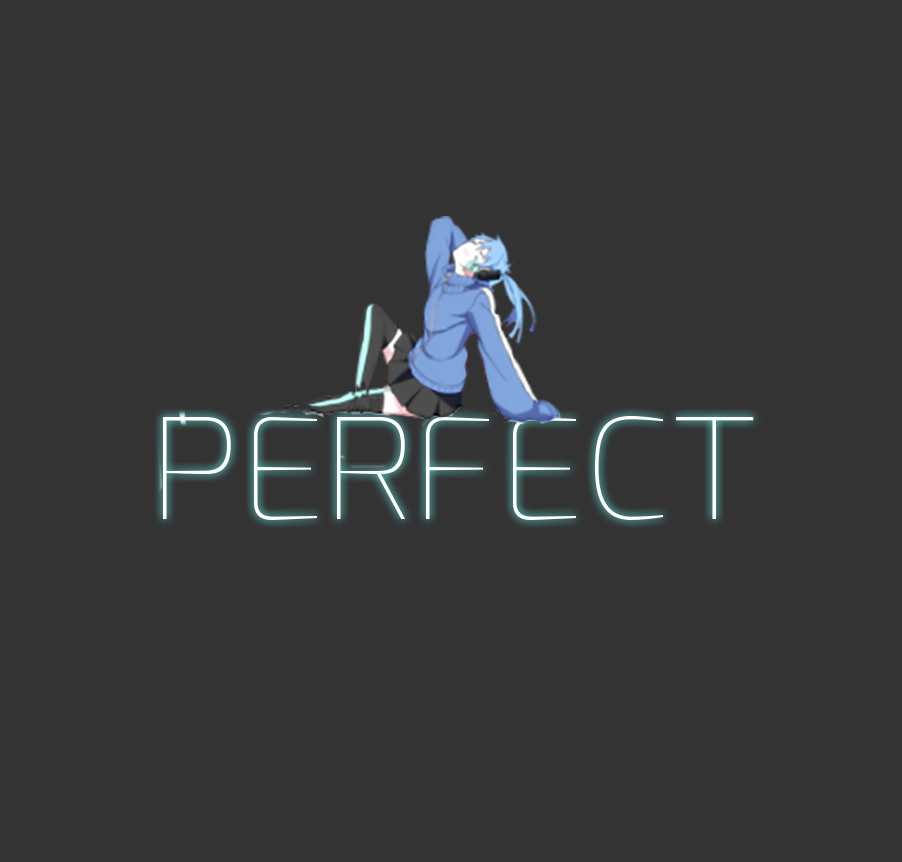
<style>
.page{position:relative;width:902px;height:862px;background:#333333}
.page>*{position:absolute;margin:0}
.t1{font:138.8px "Exo-Thin";color:#ffffff;scale:1.07 1}
</style>
<div class="page">
<p class="t1" style="left:163px;top:416px;width:591px;height:104px">PERFECT</p>
</div>
